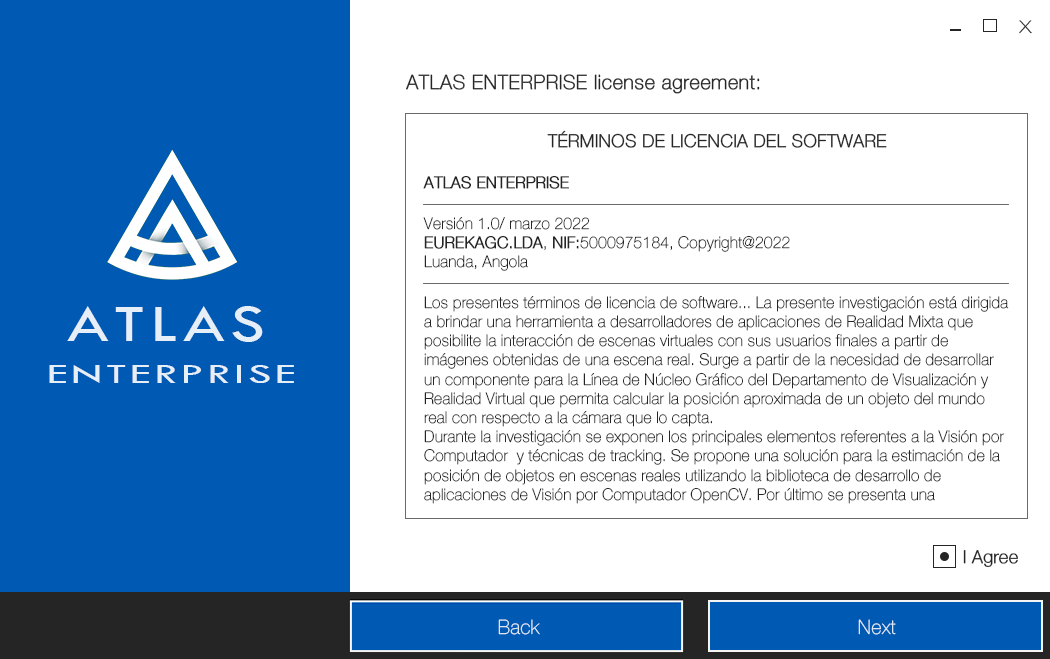
<style>
.page{position:relative;width:1050px;height:659px;background:#ffffff}
.page>*{position:absolute;margin:0}
.t1{font:24px "HelveticaNeue-Thin";color:#252526;scale:1.2 1}
.t2{font:20px "HelveticaNeue-Thin";color:#252526;font-weight:bold}
.t3{font:16px "HelveticaNeue-Thin";color:#252526}
.t4{font:18px "HelveticaNeue-Thin";color:#252526;text-transform:uppercase;font-weight:bold}
.t5{font:16px "HelveticaNeue-Thin";color:#252526;text-transform:uppercase;font-weight:bold}
.t6{font:16px "HelveticaNeue-Thin";color:#252526;text-transform:uppercase}
.t7{font:18px "HelveticaNeue-Thin";color:#252526}
.t8{font:54px "TwCenMT-Regular";letter-spacing:0.075em;color:#e6eff8;scale:1.3 1}
.t9{font:28.8px "TwCenMT-Regular";letter-spacing:0.075em;color:#e6eff8;scale:1.62 1}
.t10{font:18px "HelveticaNeue-Thin";color:#252526;font-weight:bold}
.t11{font:20px "HelveticaNeue-Thin";color:#e6eff8}
</style>
<div class="page">
<p class="t1" style="left:1019px;top:20px;width:13px;height:14px">x</p>
<p class="t2" style="left:406px;top:74px;width:354px;height:20px">ATLAS ENTERPRISE license agreement:</p>
<p class="t3" style="left:423px;top:130px;width:586px;height:374px;text-align:center"><span class="t4">Términos de Licencia del Software<br><br></span><span class="t5">ATLAS ENTERPRISE<br><br></span><span class="t6">V</span>ersión<span class="t6"> 1.0/ </span>marzo 2022<br><span class="t5">EUREKAGC.LDA</span><span class="t6">,</span><span class="t5"> NIF:</span><span class="t6">5000975184, C</span>opyright@2022<br>Luanda, Angola<br><br>Los presentes términos de licencia de software... La presente investigación está dirigida a brindar una herramienta a desarrolladores de aplicaciones de Realidad Mixta que posibilite la interacción de escenas virtuales con sus usuarios finales a partir de imágenes obtenidas de una escena real. Surge a partir de la necesidad de desarrollar un componente para la Línea de Núcleo Gráfico del Departamento de Visualización y Realidad Virtual que permita calcular la posición aproximada de un objeto del mundo real con respecto a la cámara que lo capta.<br>Durante la investigación se exponen los principales elementos referentes a la Visión por Computador  y técnicas de tracking. Se propone una solución para la estimación de la posición de objetos en escenas reales utilizando la biblioteca de desarrollo de aplicaciones de Visión por Computador OpenCV. Por último se presenta una <span class="t7">descripción de la solución propuesta, respaldada por la correspondiente implementación de un componente que  estima la posición de un objeto durante una secuencia de imágenes, donde los datos obtenidos a partir de esta estimación, son fácilmente usados para lograr una interacción de dicho objeto con escenas virtuales, creadas en cualquier biblioteca de gráfico por computadora. Dicho componente pretende de servir de base para comenzar a dar los primeros pasos en la creación de aplicaciones de Realidad Mixta en la Facultad 5 de la Universidad de las Ciencias Informáticas.</span></p>
<p class="t8" style="left:67px;top:306px;width:196px;height:36px">ATLAS</p>
<p class="t9" style="left:49px;top:365px;width:245px;height:18px">ENTERPRISE</p>
<p class="t10" style="left:963px;top:550px;width:55px;height:17px">I Agree</p>
<p class="t11" style="left:498px;top:619px;width:42px;height:16px">Back</p>
<p class="t11" style="left:858px;top:619px;width:38px;height:16px">Next</p>
</div>
